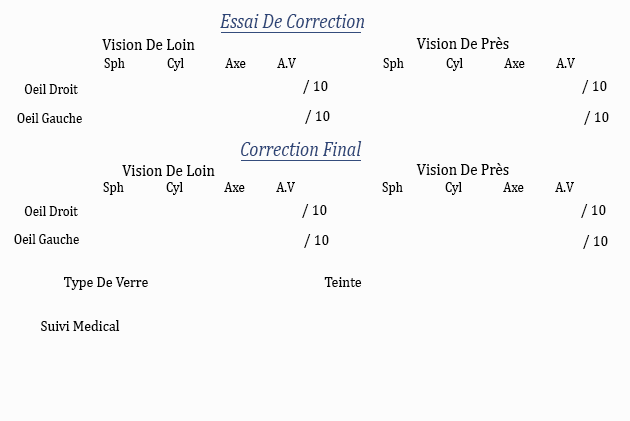
<style>
.page{position:relative;width:630px;height:421px;background:#fcfcfc}
.page>*{position:absolute;margin:0}
.t1{font:20.5px "Cambria-Italic";color:#2c4476;scale:0.88 1}
.t2{font:17.1px "Cambria";color:#030303;scale:0.88 1}
.t3{font:14.8px "Cambria";color:#000000;scale:0.88 1}
.t4{font:14.8px "Cambria";color:#030303;scale:0.88 1}
.t5{font:16px "Cambria";color:#030303;scale:0.88 1}
</style>
<div class="page">
<p class="t1" style="left:220px;top:14px;width:144px;height:14px">Essai De Correction</p>
<p class="t2" style="left:102px;top:39px;width:93px;height:11px">Vision De Loin</p>
<p class="t2" style="left:416px;top:37px;width:93px;height:12px">Vision De Près</p>
<p class="t3" style="left:104px;top:58px;width:21px;height:13px">Sph</p>
<p class="t3" style="left:167px;top:58px;width:17px;height:13px">Cyl</p>
<p class="t3" style="left:225px;top:58px;width:21px;height:10px">Axe</p>
<p class="t3" style="left:277px;top:58px;width:19px;height:10px">A.V</p>
<p class="t3" style="left:383px;top:58px;width:21px;height:13px">Sph</p>
<p class="t3" style="left:446px;top:58px;width:17px;height:13px">Cyl</p>
<p class="t3" style="left:504px;top:58px;width:21px;height:10px">Axe</p>
<p class="t3" style="left:556px;top:58px;width:19px;height:10px">A.V</p>
<p class="t4" style="left:24px;top:84px;width:54px;height:10px">Oeil Droit</p>
<p class="t5" style="left:303px;top:80px;width:25px;height:14px">10 /</p>
<p class="t5" style="left:582px;top:80px;width:25px;height:14px">10 /</p>
<p class="t4" style="left:17px;top:113px;width:65px;height:10px">Oeil Gauche</p>
<p class="t5" style="left:305px;top:110px;width:25px;height:14px">10 /</p>
<p class="t5" style="left:584px;top:111px;width:25px;height:14px">10 /</p>
<p class="t1" style="left:241px;top:141px;width:121px;height:15px">Correction Final</p>
<p class="t2" style="left:122px;top:165px;width:93px;height:11px">Vision De Loin</p>
<p class="t2" style="left:416px;top:163px;width:93px;height:12px">Vision De Près</p>
<p class="t3" style="left:103px;top:182px;width:21px;height:13px">Sph</p>
<p class="t3" style="left:166px;top:182px;width:17px;height:13px">Cyl</p>
<p class="t3" style="left:224px;top:182px;width:21px;height:10px">Axe</p>
<p class="t3" style="left:276px;top:182px;width:19px;height:10px">A.V</p>
<p class="t3" style="left:382px;top:182px;width:21px;height:13px">Sph</p>
<p class="t3" style="left:445px;top:182px;width:17px;height:13px">Cyl</p>
<p class="t3" style="left:503px;top:182px;width:21px;height:10px">Axe</p>
<p class="t3" style="left:555px;top:182px;width:19px;height:10px">A.V</p>
<p class="t4" style="left:24px;top:206px;width:54px;height:10px">Oeil Droit</p>
<p class="t5" style="left:302px;top:204px;width:25px;height:14px">10 /</p>
<p class="t5" style="left:581px;top:204px;width:25px;height:14px">10 /</p>
<p class="t4" style="left:14px;top:234px;width:65px;height:10px">Oeil Gauche</p>
<p class="t5" style="left:304px;top:234px;width:25px;height:14px">10 /</p>
<p class="t5" style="left:583px;top:235px;width:25px;height:14px">10 /</p>
<p class="t5" style="left:64px;top:277px;width:84px;height:13px">Type De Verre</p>
<p class="t5" style="left:324px;top:277px;width:38px;height:10px">Teinte</p>
<p class="t5" style="left:41px;top:320px;width:79px;height:11px">Suivi Medical</p>
</div>
